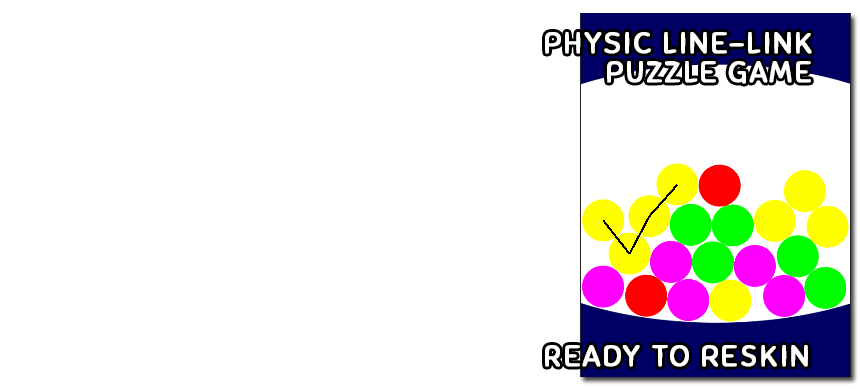
<style>
.page{position:relative;width:860px;height:389px;background:#ffffff}
.page>*{position:absolute;margin:0}
.t1{font:28.5px/14.4px "Sniglet-Regular";letter-spacing:0.06em;color:#ffffff;text-transform:uppercase;font-weight:bold;scale:1.05 1}
.t2{font:28.5px "Sniglet-Regular";letter-spacing:0.06em;color:#ffffff;text-transform:uppercase;font-weight:bold;scale:1.05 1}
</style>
<div class="page">
<p class="t1" style="left:545px;top:32px;width:267px;height:52px;text-align:right">Physic line-link<br><br>puzzle game</p>
<p class="t2" style="left:545px;top:345px;width:263px;height:22px">Ready to reskin</p>
</div>
